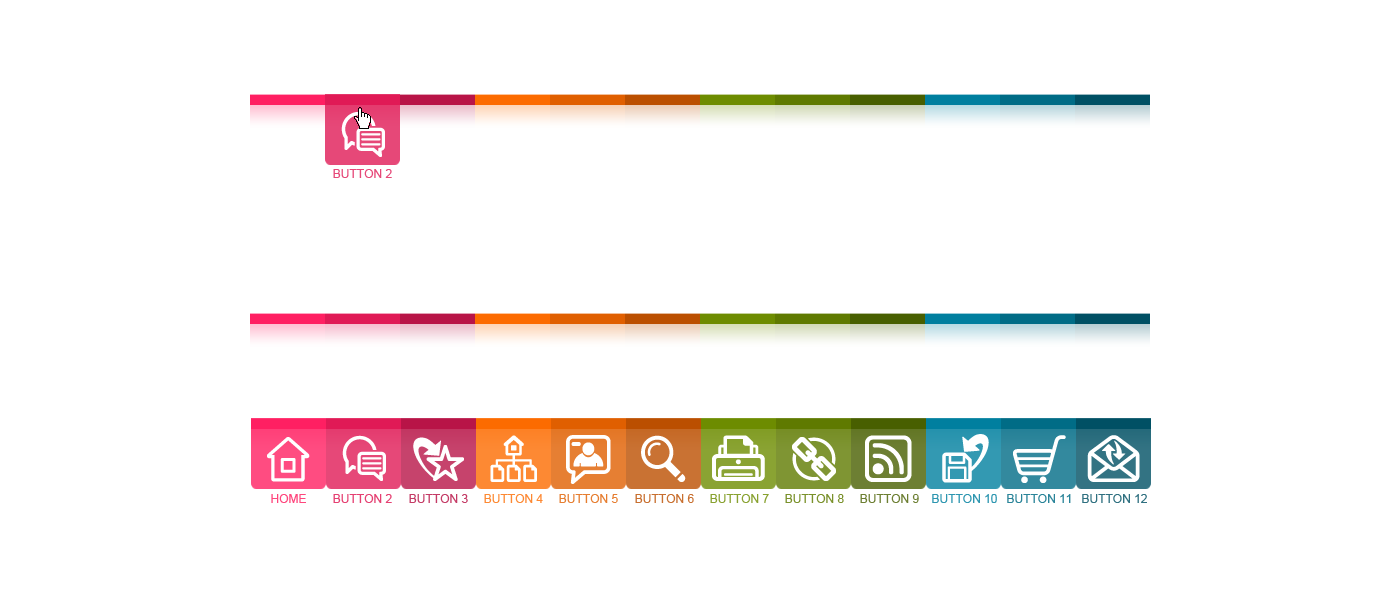
<style>
.page{position:relative;width:1400px;height:600px;background:#ffffff}
.page>*{position:absolute;margin:0}
.t1{font:12px "ArialMT";color:#e64878}
.t2{font:12px "ArialMT";color:#ff467d}
.t3{font:12px "ArialMT";color:#e54072}
.t4{font:12px "ArialMT";color:#c43b66}
.t5{font:12px "ArialMT";color:#fd8933}
.t6{font:12px "ArialMT";color:#e67e31}
.t7{font:12px "ArialMT";color:#c86f2f}
.t8{font:12px "ArialMT";color:#89a231}
.t9{font:12px "ArialMT";color:#7a912b}
.t10{font:12px "ArialMT";color:#6d7f33}
.t11{font:12px "ArialMT";color:#2d96b0}
.t12{font:12px "ArialMT";color:#2a8499}
.t13{font:12px "ArialMT";color:#2f7080}
</style>
<div class="page">
<p class="t1" style="left:333px;top:169px;width:59px;height:9px">BUTTON 2</p>
<p class="t2" style="left:271px;top:494px;width:35px;height:9px">HOME</p>
<p class="t3" style="left:333px;top:494px;width:59px;height:9px">BUTTON 2</p>
<p class="t4" style="left:409px;top:494px;width:59px;height:9px">BUTTON 3</p>
<p class="t5" style="left:484px;top:494px;width:59px;height:9px">BUTTON 4</p>
<p class="t6" style="left:559px;top:494px;width:59px;height:9px">BUTTON 5</p>
<p class="t7" style="left:635px;top:494px;width:59px;height:9px">BUTTON 6</p>
<p class="t8" style="left:710px;top:494px;width:59px;height:9px">BUTTON 7</p>
<p class="t9" style="left:785px;top:494px;width:59px;height:9px">BUTTON 8</p>
<p class="t10" style="left:860px;top:494px;width:59px;height:9px">BUTTON 9</p>
<p class="t11" style="left:932px;top:494px;width:65px;height:9px">BUTTON 10</p>
<p class="t12" style="left:1007px;top:494px;width:64px;height:9px">BUTTON 11</p>
<p class="t13" style="left:1082px;top:494px;width:65px;height:9px">BUTTON 12</p>
</div>
